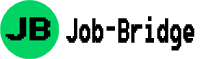
<style>
.page{position:relative;width:206px;height:59px;background:#ffffff}
.page>*{position:absolute;margin:0}
.t1{font:42.1px "Terminal";color:#000000;font-weight:bold;scale:0.66 1}
</style>
<div class="page">
<p class="t1" style="left:66px;top:16px;width:129px;height:35px">Job-Bridge</p>
</div>
